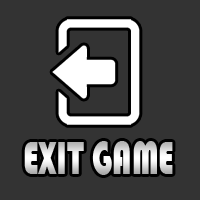
<style>
.page{position:relative;width:200px;height:200px;background:#333333}
.page>*{position:absolute;margin:0}
.t1{font:48px "Bauhaus93";scale:0.69 1}
</style>
<div class="page">
<p class="t1" style="left:24px;top:141px;width:149px;height:34px">EXIT GAME</p>
</div>
